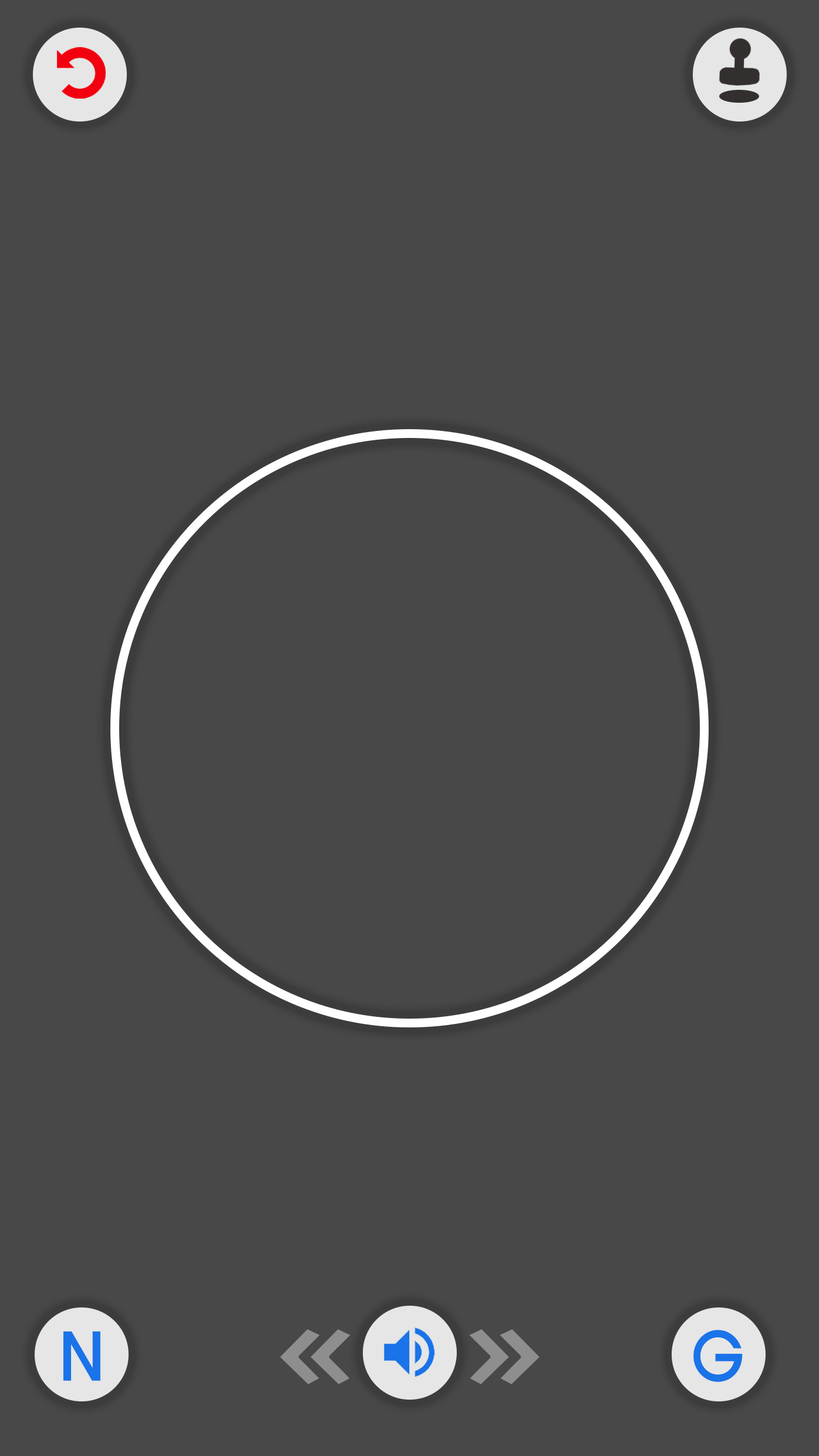
<style>
.page{position:relative;width:819px;height:1456px;background:#484848}
.page>*{position:absolute;margin:0}
.t1{font:69px "HaanYHeadM";color:#1a73e8;scale:0.94 1}
</style>
<div class="page">
<p class="t1" style="left:63px;top:1331px;width:37px;height:50px">N</p>
<p class="t1" style="left:693px;top:1330px;width:50px;height:52px">G</p>
</div>
